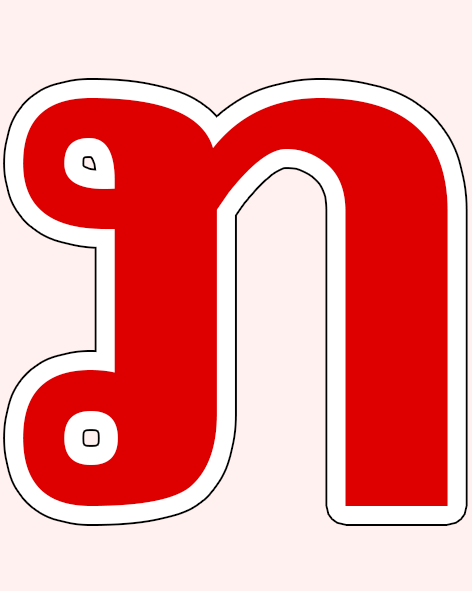
<style>
.page{position:relative;width:472px;height:591px;background:#fef1ef}
.page>*{position:absolute;margin:0}
.t1{font:727.5px "Phetsarath-Bold";letter-spacing:0.04em;color:#de0001}
</style>
<div class="page">
<p class="t1" style="left:23px;top:98px;width:425px;height:408px">ກ</p>
</div>
